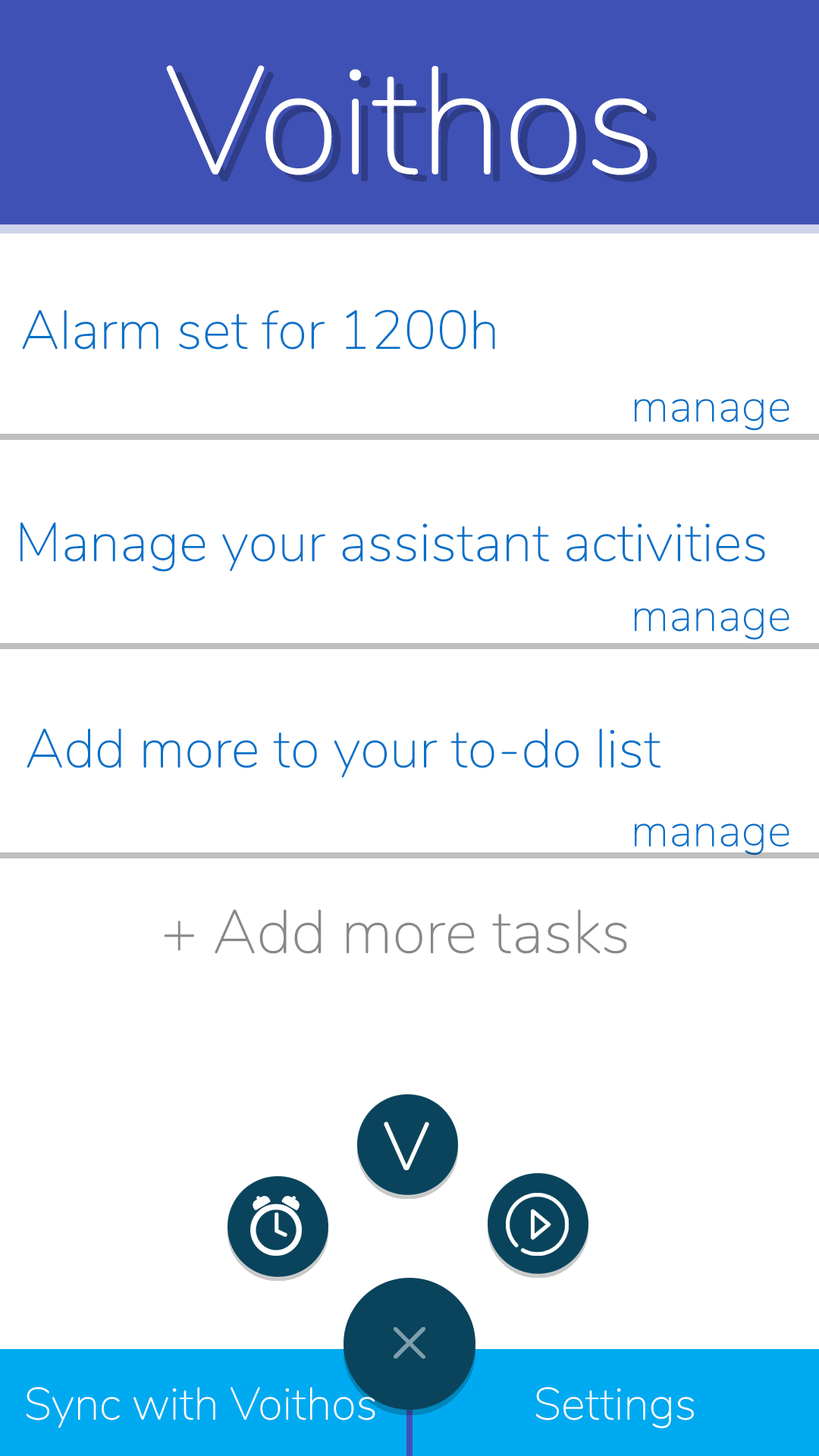
<style>
.page{position:relative;width:819px;height:1456px;background:#ffffff}
.page>*{position:absolute;margin:0}
.t1{font:151.7px "Nunito-ExtraLight";color:#ffffff}
.t2{font:54.6px "Nunito-ExtraLight";color:#0271c9}
.t3{font:45.5px "Nunito-ExtraLight";color:#0271c9}
.t4{font:61.2px "Nunito-ExtraLight";color:#888888}
.t5{font:96.9px "Nunito-ExtraLight";color:#ffffff}
.t6{font:45.5px "Nunito-ExtraLight";color:#ffffff}
</style>
<div class="page">
<p class="t1" style="left:166px;top:65px;width:482px;height:110px">Voithos</p>
<p class="t2" style="left:22px;top:309px;width:473px;height:41px">Alarm set for 1200h</p>
<p class="t3" style="left:635px;top:399px;width:154px;height:32px">manage</p>
<p class="t2" style="left:20px;top:522px;width:745px;height:50px">Manage your assistant activities</p>
<p class="t3" style="left:635px;top:608px;width:154px;height:32px">manage</p>
<p class="t2" style="left:27px;top:728px;width:633px;height:50px">Add more to your to-do list</p>
<p class="t3" style="left:635px;top:824px;width:154px;height:31px">manage</p>
<p class="t4" style="left:164px;top:909px;width:463px;height:45px">+ Add more tasks</p>
<p class="t5" style="left:384px;top:1122px;width:45px;height:49px">v</p>
<p class="t6" style="left:26px;top:1387px;width:349px;height:41px">Sync with Voithos</p>
<p class="t6" style="left:535px;top:1387px;width:159px;height:42px">Settings</p>
</div>
